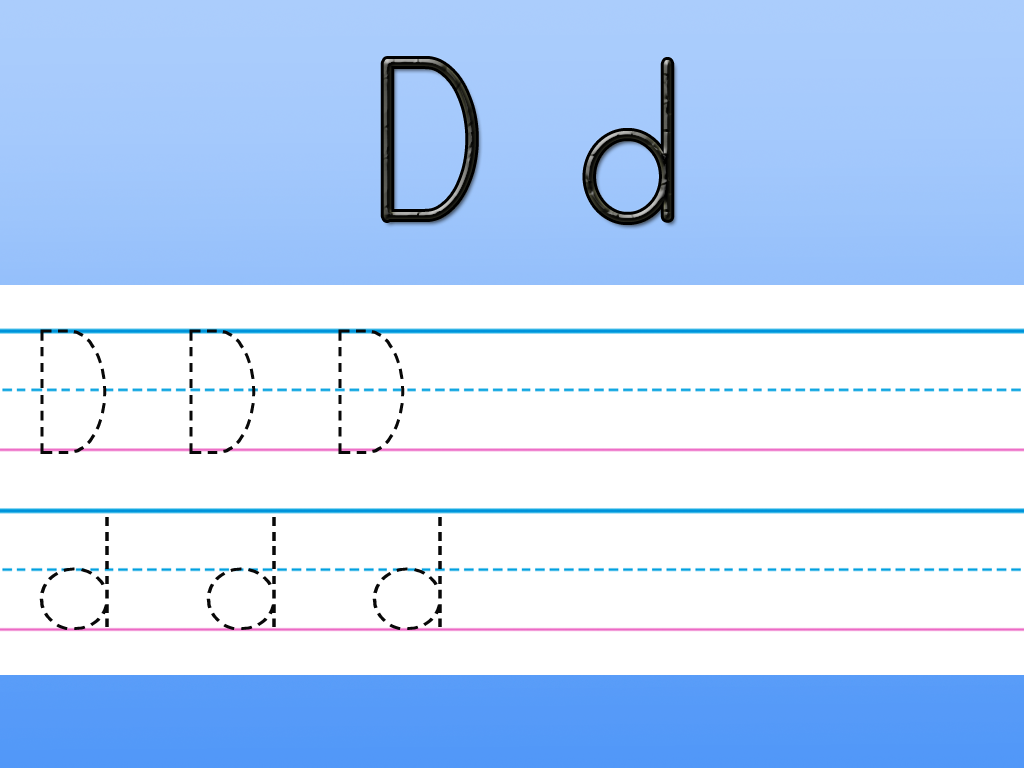
<style>
.page{position:relative;width:1024px;height:768px;background:#ffffff}
.page>*{position:absolute;margin:0}
.t1{font:260px "PrintClearly"}
.t2{font:205.6px "PrintDashed";color:#080808;scale:0.94 1}
.t3{font:187.6px "PrintDashed";color:#080808;scale:1.2 1}
</style>
<div class="page">
<p class="t1" style="left:383px;top:59px;width:289px;height:163px">D d</p>
<p class="t2" style="left:40px;top:329px;width:365px;height:125px">D D D</p>
<p class="t3" style="left:39px;top:517px;width:403px;height:113px">d d d</p>
</div>
